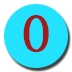
<style>
.page{position:relative;width:72px;height:72px;background:#22e2fe}
.page>*{position:absolute;margin:0}
.t1{font:48px "FZXKFW--GB1-0";color:#9e1e1e;font-weight:bold}
</style>
<div class="page">
<p class="t1" style="left:23px;top:15px;width:26px;height:38px">0</p>
</div>
